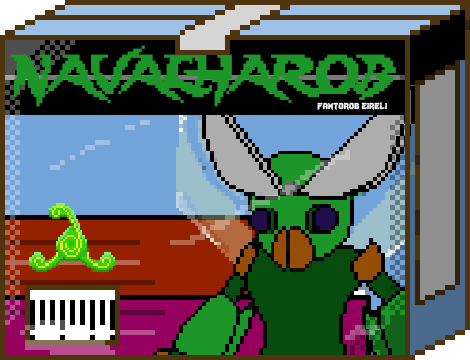
<style>
.page{position:relative;width:470px;height:360px}
.page>*{position:absolute;margin:0}
.t1{font:48.3px "Lady-Radical";color:#1d9629;scale:0.93 1}
.t2{font:12px "Lady-Radical";color:#fbfbfb}
</style>
<div class="page">
<p class="t1" style="left:11px;top:45px;width:385px;height:62px">NAVALHAROB</p>
<p class="t2" style="left:317px;top:102px;width:70px;height:8px">fantorob eireli</p>
</div>
